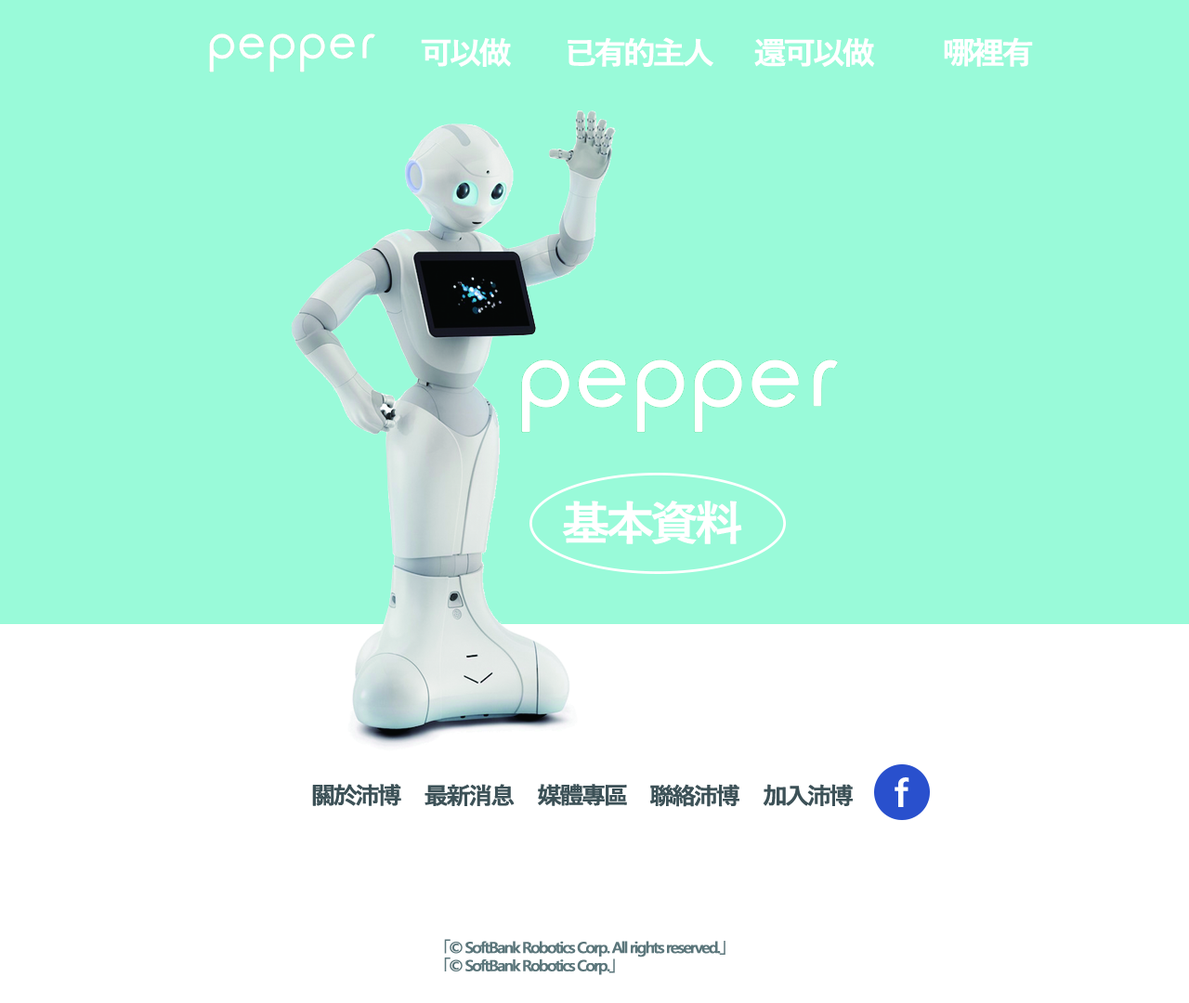
<style>
.page{position:relative;width:1189px;height:1003px;background:#99fad9}
.page>*{position:absolute;margin:0}
.t1{font:31px "YuGothicUI-Semibold";letter-spacing:-0.12em;color:#ffffff;font-weight:bold;scale:1.05 1}
.t2{font:46.4px "YuGothicUI-Semibold";letter-spacing:-0.12em;color:#ffffff;font-weight:bold;scale:1.05 1}
.t3{font:23.2px "YuGothicUI-Semibold";letter-spacing:-0.12em;color:#3c5157;font-weight:bold;scale:1.05 1}
.t4{font:38.7px "YuGothicUI-Semibold";letter-spacing:-0.12em;color:#ffffff;font-weight:bold;scale:1.05 1}
.t5{font:15.5px/18.1px "YuGothicUI-Semibold";letter-spacing:-0.12em;color:#5b757b;font-weight:bold;scale:1.05 1}
</style>
<div class="page">
<p class="t1" style="left:421px;top:38px;width:90px;height:29px">可以做</p>
<p class="t1" style="left:567px;top:37px;width:146px;height:30px">已有的主人</p>
<p class="t1" style="left:754px;top:38px;width:121px;height:29px">還可以做</p>
<p class="t1" style="left:944px;top:37px;width:89px;height:30px">哪裡有</p>
<p class="t2" style="left:562px;top:501px;width:180px;height:43px">基本資料</p>
<p class="t3" style="left:312px;top:784px;width:89px;height:22px">關於沛博</p>
<p class="t3" style="left:424px;top:784px;width:91px;height:22px">最新消息</p>
<p class="t3" style="left:538px;top:784px;width:89px;height:22px">媒體專區</p>
<p class="t3" style="left:650px;top:784px;width:89px;height:23px">聯絡沛博</p>
<p class="t3" style="left:763px;top:784px;width:90px;height:22px">加入沛博</p>
<p class="t4" style="left:894px;top:777px;width:15px;height:30px">f</p>
<p class="t5" style="left:444px;top:939px;width:281px;height:36px">「© SoftBank Robotics Corp. All rights reserved.」<br>「© SoftBank Robotics Corp.」</p>
</div>
